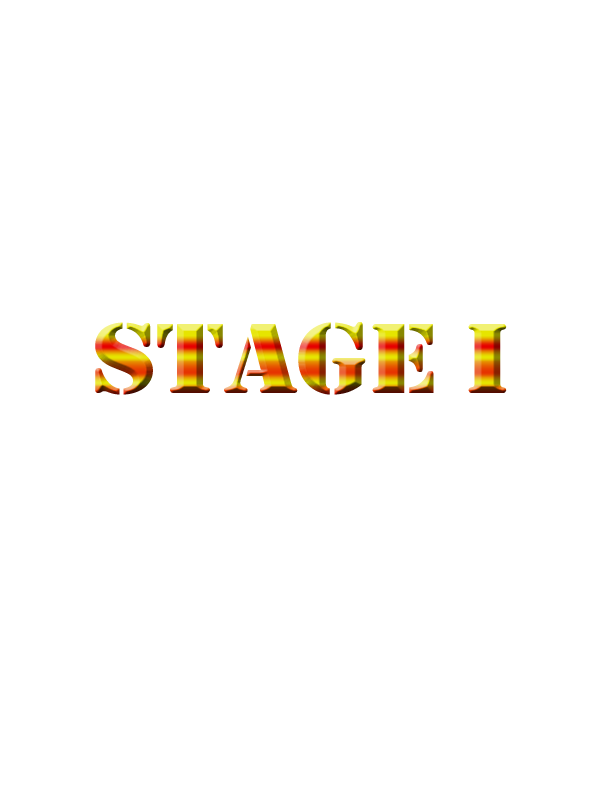
<style>
.page{position:relative;width:600px;height:800px;background:#ffffff}
.page>*{position:absolute;margin:0}
.t1{font:103.6px "Stencil";letter-spacing:-0.01em;scale:1.14 1}
</style>
<div class="page">
<p class="t1" style="left:95px;top:322px;width:412px;height:73px">Stage I</p>
</div>
